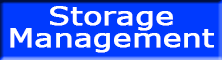
<style>
.page{position:relative;width:222px;height:60px;background:#003afe}
.page>*{position:absolute;margin:0}
.t1{font:24.5px/22px "Verdana";color:#ffffff;font-weight:bold;scale:1.25 1}
</style>
<div class="page">
<p class="t1" style="left:10px;top:6px;width:204px;height:47px;text-align:center">Storage<br>Management</p>
</div>
